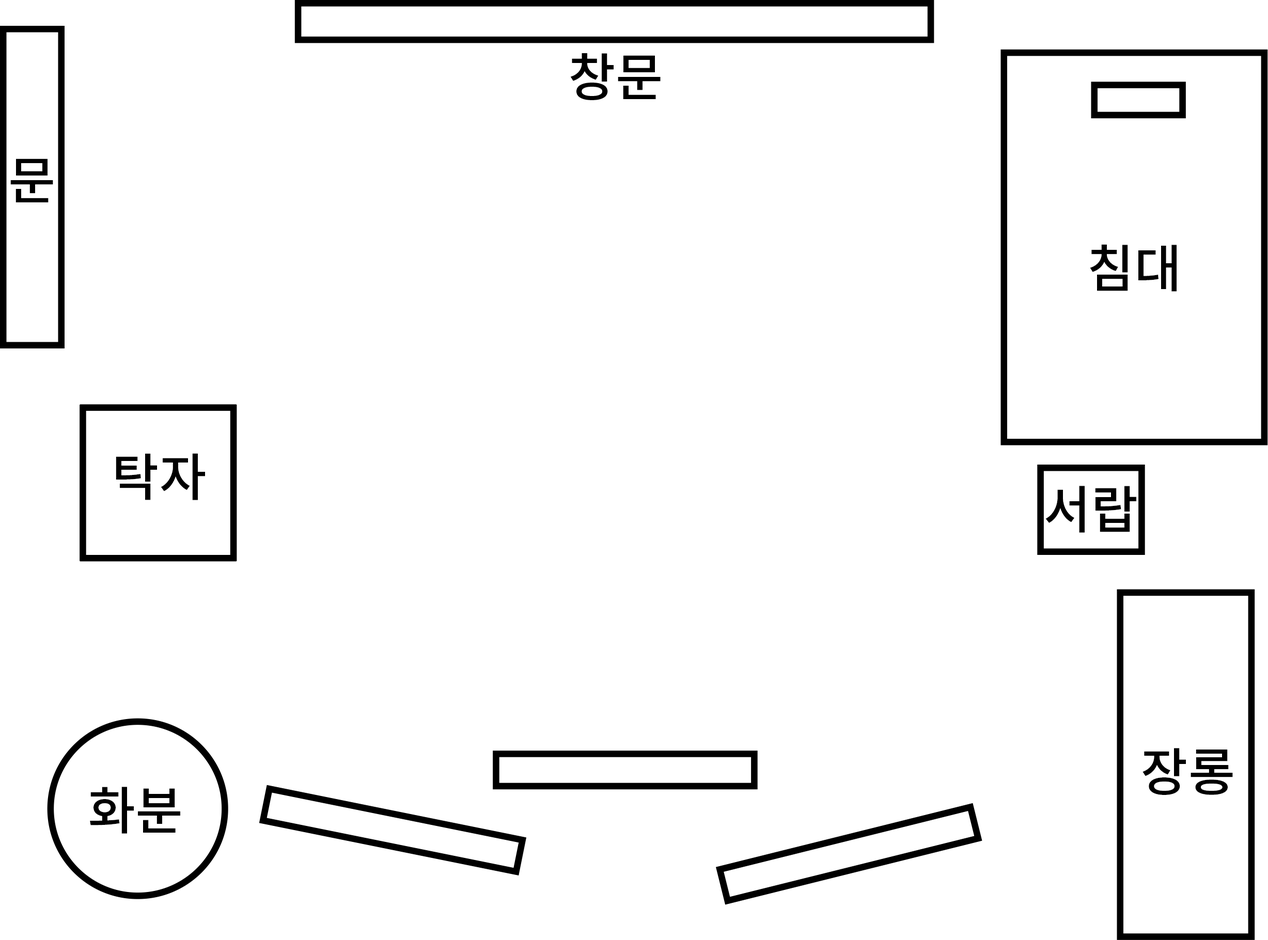
<style>
.page{position:relative;width:1268px;height:940px;background:#ffffff}
.page>*{position:absolute;margin:0}
.t1{font:51.6px "NotoSansKR-Medium";color:#000000}
</style>
<div class="page">
<p class="t1" style="left:570px;top:53px;width:91px;height:47px">창문</p>
<p class="t1" style="left:10px;top:159px;width:43px;height:43px">문</p>
<p class="t1" style="left:1090px;top:244px;width:86px;height:48px">침대</p>
<p class="t1" style="left:116px;top:453px;width:89px;height:47px">탁자</p>
<p class="t1" style="left:1045px;top:486px;width:91px;height:47px">서랍</p>
<p class="t1" style="left:1142px;top:748px;width:91px;height:47px">장롱</p>
<p class="t1" style="left:90px;top:787px;width:90px;height:47px">화분</p>
</div>
